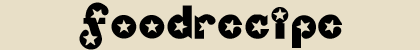
<style>
.page{position:relative;width:420px;height:50px;background:#e8dfc7}
.page>*{position:absolute;margin:0}
.t1{font:55px "Independence";color:#000000}
</style>
<div class="page">
<p class="t1" style="left:79px;top:2px;width:263px;height:48px">foodrecipe</p>
</div>
